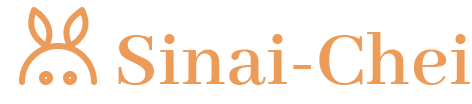
<style>
.page{position:relative;width:472px;height:104px;background:#ffffff}
.page>*{position:absolute;margin:0}
.t1{font:82.4px "AbhayaLibre-SemiBold";color:#ed9b59}
</style>
<div class="page">
<p class="t1" style="left:118px;top:32px;width:353px;height:53px">Sinai-Chei</p>
</div>
